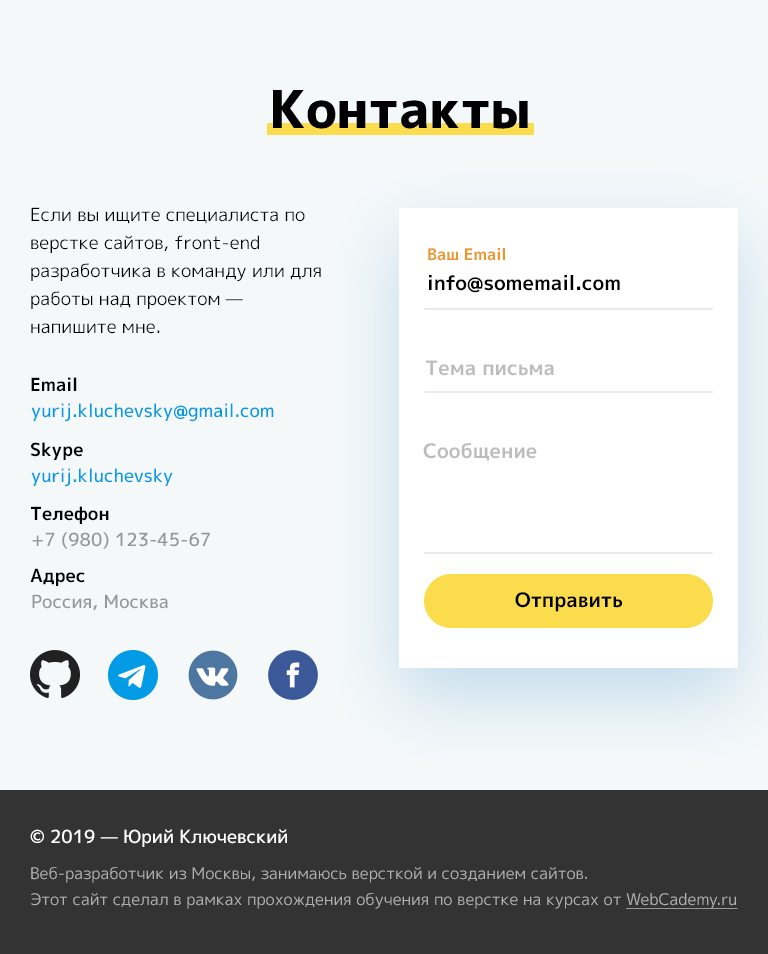
<style>
.page{position:relative;width:768px;height:954px;background:#f4f8f9}
.page>*{position:absolute;margin:0}
.t1{font:52px "Mplus1p-ExtraBold";color:#000000}
.t2{font:18px/28px "Mplus1p-Regular";color:#000000}
.t3{font:16px "Mplus1p-Bold";color:#ed9626}
.t4{font:20px "Mplus1p-Bold";color:#000000}
.t5{font:20px "Mplus1p-Bold";color:#bcbcbc}
.t6{font:18px "Mplus1p-Bold";color:#000000}
.t7{font:18px "Mplus1p-Medium";color:#039be5}
.t8{font:18px "Mplus1p-Medium";color:#96969d}
.t9{font:16px/26px "Mplus1p-Regular";color:#b0b0b0}
.t10{font:18px "Mplus1p-Medium";color:#ffffff}
.t11{font:16px/26px "Mplus1p-Regular";color:#b0b0b0;text-decoration:underline}
</style>
<div class="page">
<p class="t1" style="left:273px;top:90px;width:255px;height:39px">Контакты</p>
<p class="t2" style="left:31px;top:207px;width:290px;height:127px">Если вы ищите специалиста по верстке сайтов, front-end разработчика в команду или для работы над проектом —  напишите мне.</p>
<p class="t3" style="left:428px;top:248px;width:77px;height:13px">Ваш Email</p>
<p class="t4" style="left:429px;top:275px;width:191px;height:18px">info@somemail.com</p>
<p class="t5" style="left:426px;top:360px;width:128px;height:16px">Тема письма</p>
<p class="t6" style="left:31px;top:377px;width:46px;height:15px">Email</p>
<p class="t7" style="left:31px;top:403px;width:243px;height:19px">yurij.kluchevsky@gmail.com</p>
<p class="t6" style="left:31px;top:442px;width:52px;height:18px">Skype</p>
<p class="t5" style="left:423px;top:443px;width:114px;height:18px">Сообщение</p>
<p class="t7" style="left:31px;top:468px;width:142px;height:19px">yurij.kluchevsky</p>
<p class="t6" style="left:31px;top:506px;width:78px;height:18px">Телефон</p>
<p class="t8" style="left:32px;top:532px;width:178px;height:17px">+7 (980) 123-45-67</p>
<p class="t6" style="left:30px;top:568px;width:55px;height:18px">Адрес</p>
<p class="t4" style="left:515px;top:592px;width:107px;height:20px">Отправить</p>
<p class="t8" style="left:32px;top:594px;width:136px;height:16px">Россия, Москва</p>
<p class="t9" style="left:30px;top:829px;width:708px;height:80px"><span class="t10">© 2019 — Юрий Ключевский<br></span>Веб-разработчик из Москвы, занимаюсь версткой и созданием сайтов. <br>Этот сайт сделал в рамках прохождения обучения по верстке на курсах от <span class="t11">WebCademy.ru</span></p>
</div>
